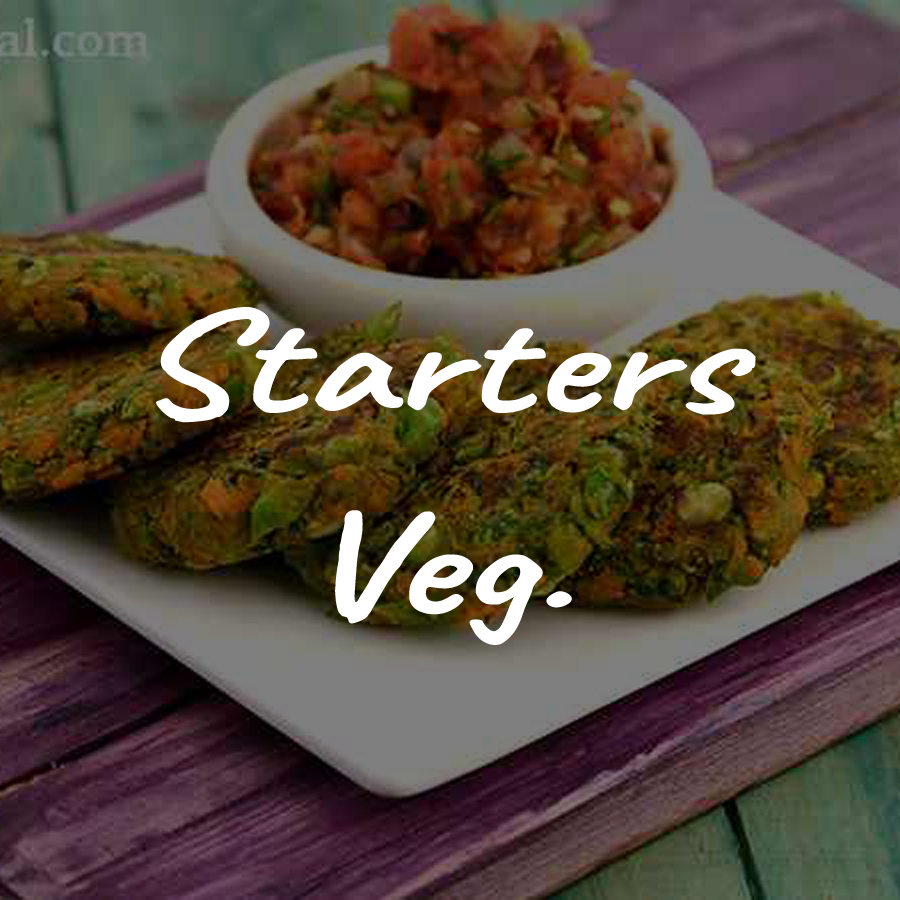
<style>
.page{position:relative;width:900px;height:900px}
.page>*{position:absolute;margin:0}
.t1{font:150px "Caveat-Bold";color:#ffffff;scale:1.34 1}
</style>
<div class="page">
<p class="t1" style="left:156px;top:307px;width:600px;height:338px;text-align:center">Starters<br>Veg.</p>
</div>
